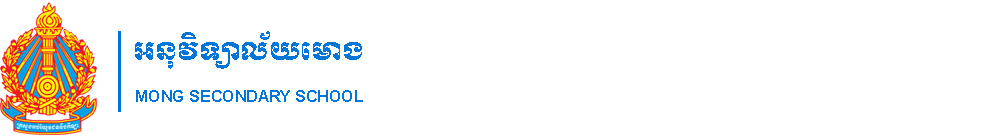
<style>
.page{position:relative;width:1000px;height:139px;background:#ffffff}
.page>*{position:absolute;margin:0}
.t1{font:25px "KhmerOSMuolLight";color:#0275d8}
.t2{font:16px "Arial-BoldMT";color:#0275d8}
</style>
<div class="page">
<p class="t1" style="left:135px;top:31px;width:227px;height:38px">អនុវិទ្យាល័យមោង</p>
<p class="t2" style="left:136px;top:90px;width:227px;height:12px">MONG SECONDARY SCHOOL</p>
</div>
